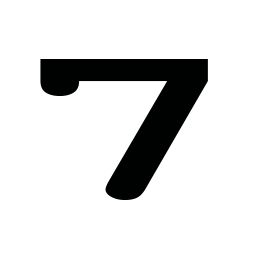
<style>
.page{position:relative;width:256px;height:256px;background:#ffffff}
.page>*{position:absolute;margin:0}
.t1{font:222.5px "CourierNewPS-BoldMT";color:#000101;scale:1.73 1}
</style>
<div class="page">
<p class="t1" style="left:40px;top:59px;width:168px;height:141px">7</p>
</div>
